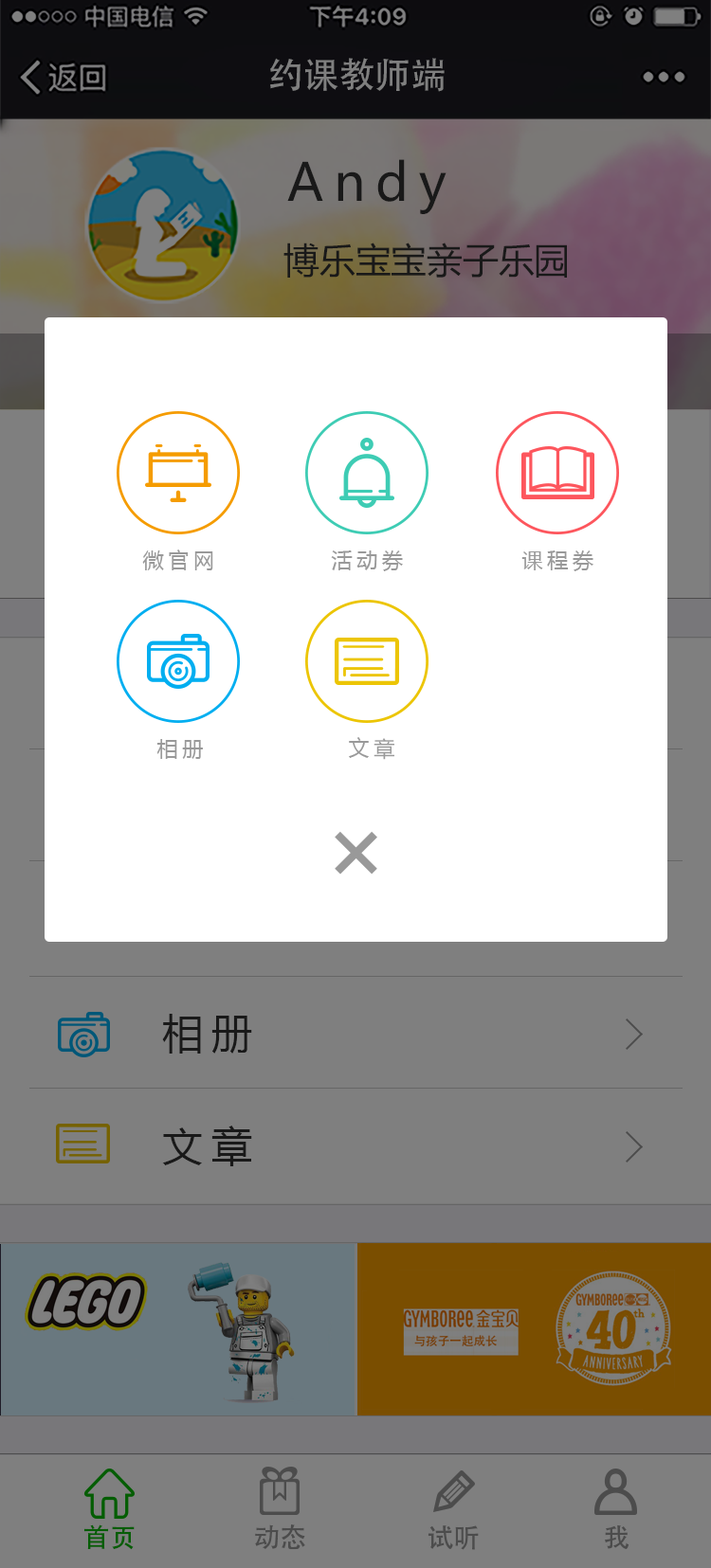
<style>
.page{position:relative;width:711px;height:1568px;background:#ffffff}
.page>*{position:absolute;margin:0}
.t1{font:35.8px "AdobeHeitiStd-Regular";color:#7f7f7f}
.t2{font:51.5px "MicrosoftYaHei";letter-spacing:0.2em;color:#191919}
.t3{font:35.8px "MicrosoftYaHei";color:#191919}
.t4{font:21.1px "MicrosoftYaHei";letter-spacing:0.2em;color:#999999}
.t5{font:105.3px "MicrosoftYaHei";letter-spacing:0.2em;color:#999999}
.t6{font:40.8px "MicrosoftYaHei";letter-spacing:0.2em;color:#191919}
.t7{font:26.3px "AdobeHeitiStd-Regular";color:#045d03}
.t8{font:26.3px "AdobeHeitiStd-Regular";color:#4c4c4c}
</style>
<div class="page">
<p class="t1" style="left:270px;top:58px;width:174px;height:34px">约课教师端</p>
<p class="t2" style="left:287px;top:159px;width:159px;height:55px">Andy</p>
<p class="t3" style="left:283px;top:243px;width:284px;height:35px">博乐宝宝亲子乐园</p>
<p class="t4" style="left:142px;top:550px;width:71px;height:20px">微官网</p>
<p class="t4" style="left:331px;top:550px;width:72px;height:21px">活动券</p>
<p class="t4" style="left:521px;top:550px;width:72px;height:21px">课程券</p>
<p class="t4" style="left:349px;top:737px;width:45px;height:23px">文章</p>
<p class="t4" style="left:156px;top:739px;width:47px;height:20px">相册</p>
<p class="t5" style="left:334px;top:831px;width:43px;height:43px;rotate:-45deg">+</p>
<p class="t6" style="left:162px;top:1014px;width:90px;height:40px">相册</p>
<p class="t6" style="left:162px;top:1126px;width:90px;height:40px">文章</p>
<p class="t7" style="left:83px;top:1524px;width:52px;height:26px">首页</p>
<p class="t8" style="left:255px;top:1524px;width:50px;height:26px">动态</p>
<p class="t8" style="left:427px;top:1525px;width:51px;height:25px">试听</p>
<p class="t8" style="left:604px;top:1524px;width:25px;height:25px">我</p>
</div>
